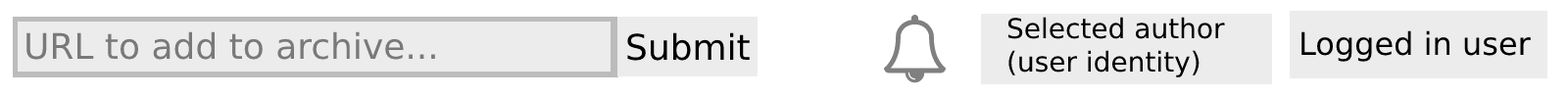
<style>
.page{position:relative;width:1568px;height:98px;background:#ffffff}
.page>*{position:absolute;margin:0}
.t1{font:27.4px "DejaVuSans";color:#000000}
.t2{font:35.3px "DejaVuSans";color:#797979}
.t3{font:35.3px "DejaVuSans";color:#000000}
.t4{font:31.4px "DejaVuSans";color:#000000}
</style>
<div class="page">
<p class="t1" style="left:1007px;top:17px;width:218px;height:60px">Selected author<br>(user identity)</p>
<p class="t2" style="left:26px;top:31px;width:409px;height:29px">URL to add to archive...</p>
<p class="t3" style="left:627px;top:32px;width:123px;height:29px">Submit</p>
<p class="t4" style="left:1301px;top:30px;width:230px;height:32px">Logged in user</p>
</div>
